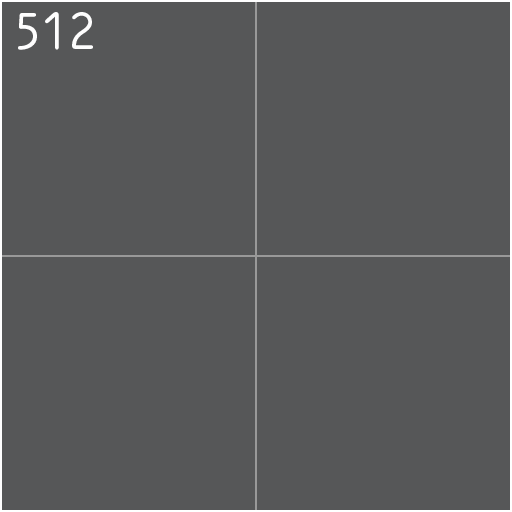
<style>
.page{position:relative;width:512px;height:512px;background:#565758}
.page>*{position:absolute;margin:0}
.t1{font:48px "OCR-B-Regular";letter-spacing:-0.075em;color:#fefefe}
</style>
<div class="page">
<p class="t1" style="left:18px;top:12px;width:75px;height:38px">512</p>
</div>
